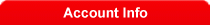
<style>
.page{position:relative;width:210px;height:25px}
.page>*{position:absolute;margin:0}
.t1{font:14px "Arial-BoldMT";color:#ffffff}
</style>
<div class="page">
<p class="t1" style="left:63px;top:7px;width:85px;height:11px">Account Info</p>
</div>
